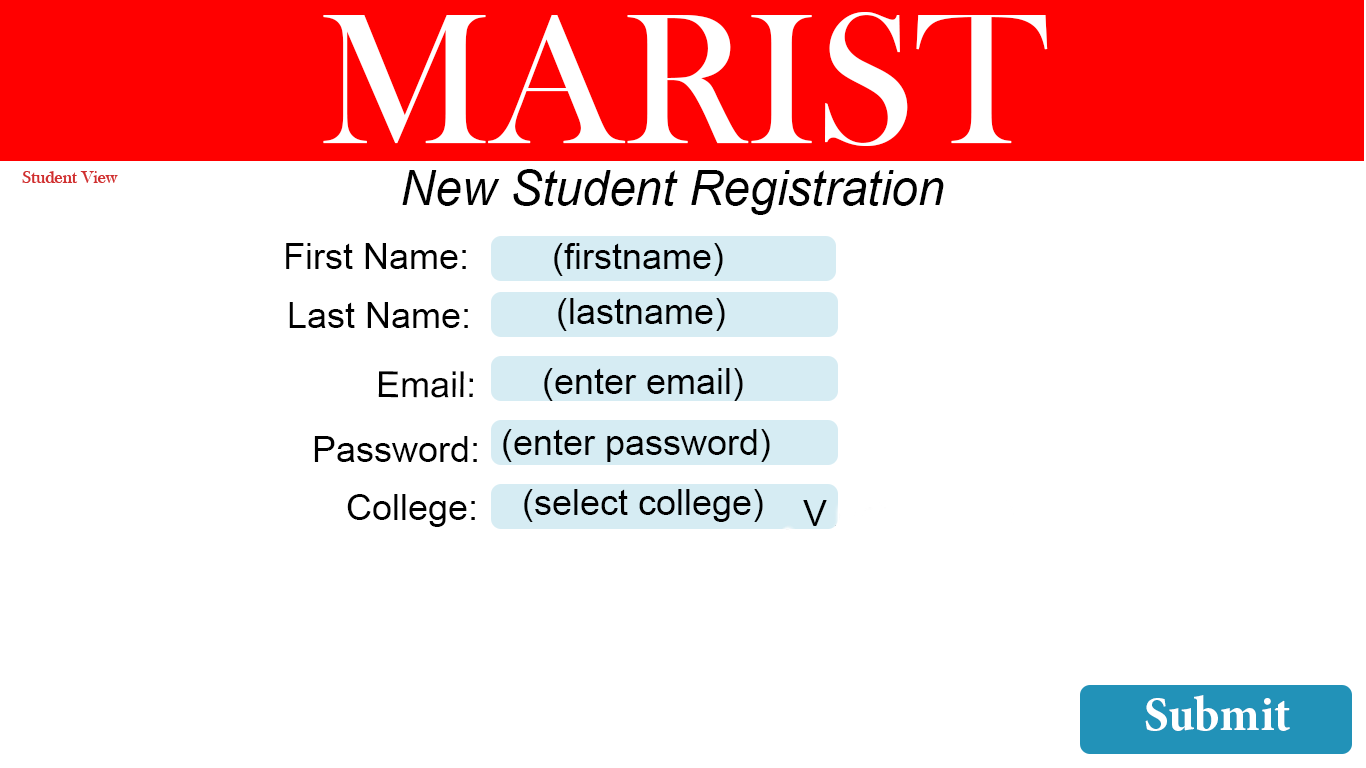
<style>
.page{position:relative;width:1366px;height:768px;background:#ffffff}
.page>*{position:absolute;margin:0}
.t1{font:48px "Arial-ItalicMT";color:#000000}
.t2{font:36px "ArialMT";color:#000000}
.t3{font:48px "MinionPro-Bold";color:#ffffff}
</style>
<div class="page">
<p class="t1" style="left:402px;top:169px;width:542px;height:46px">New Student Registration</p>
<p class="t2" style="left:286px;top:243px;width:180px;height:26px">First Name:</p>
<p class="t2" style="left:554px;top:243px;width:169px;height:33px">(firstname)</p>
<p class="t2" style="left:289px;top:302px;width:179px;height:26px">Last Name:</p>
<p class="t2" style="left:558px;top:298px;width:167px;height:33px">(lastname)</p>
<p class="t2" style="left:378px;top:371px;width:95px;height:27px">Email:</p>
<p class="t2" style="left:544px;top:368px;width:199px;height:33px">(enter email)</p>
<p class="t2" style="left:314px;top:436px;width:163px;height:26px">Password:</p>
<p class="t2" style="left:503px;top:429px;width:267px;height:33px">(enter password)</p>
<p class="t2" style="left:347px;top:494px;width:128px;height:33px">College:</p>
<p class="t2" style="left:524px;top:489px;width:239px;height:33px">(select college)</p>
<p class="t2" style="left:803px;top:500px;width:24px;height:26px">V</p>
<p class="t2" style="left:803px;top:500px;width:24px;height:26px">V</p>
<p class="t3" style="left:1145px;top:695px;width:145px;height:36px">Submit</p>
</div>
